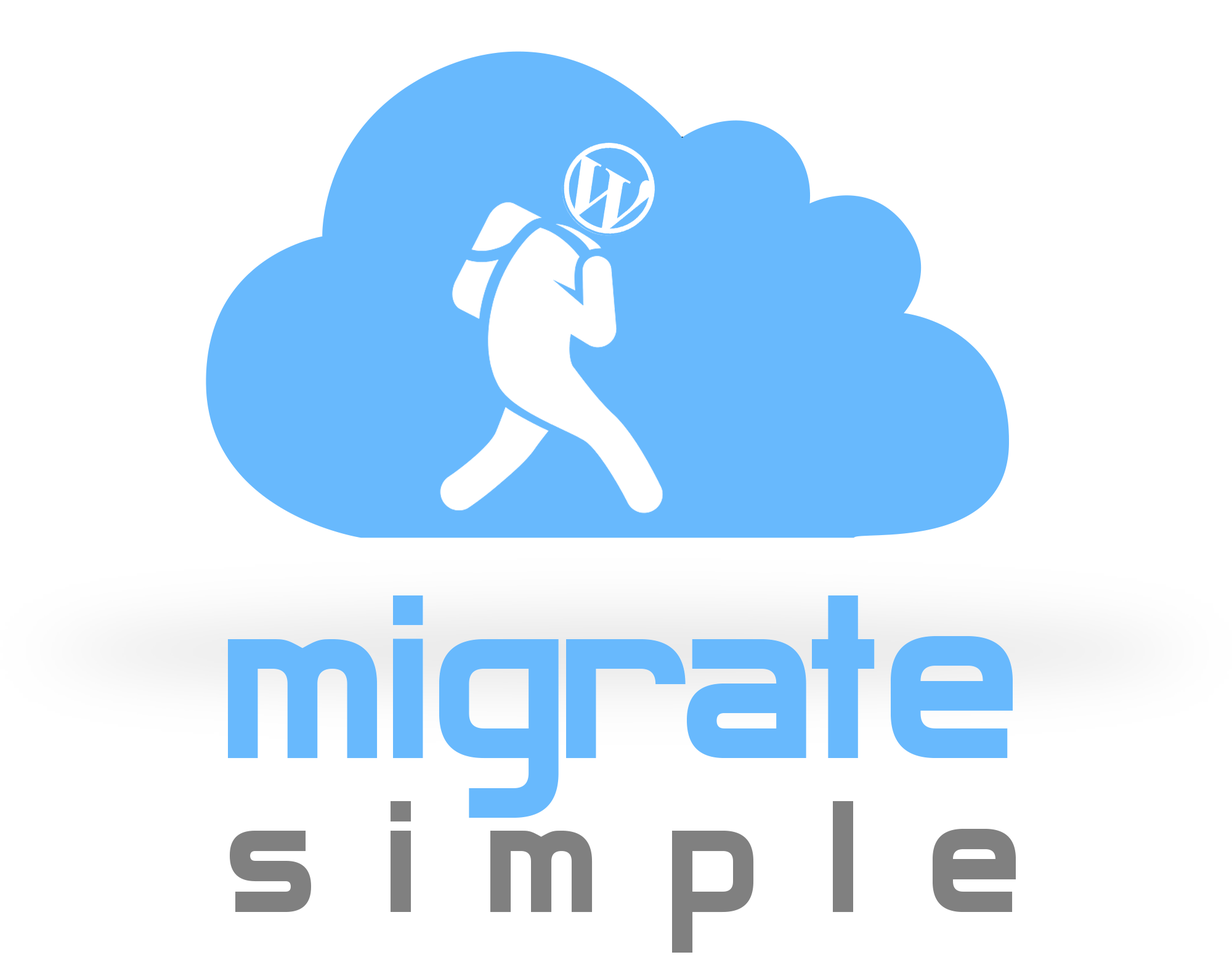
<style>
.page{position:relative;width:1232px;height:968px;background:#ffffff}
.page>*{position:absolute;margin:0}
.t1{font:270.9px/154px "Archangelsk";color:#68b9fd}
.t2{font:184.7px/154px "Archangelsk";letter-spacing:0.37em;color:#808080}
</style>
<div class="page">
<p class="t1" style="left:228px;top:596px;width:788px;height:357px;text-align:center">migrate<br><span class="t2">simple</span></p>
</div>
